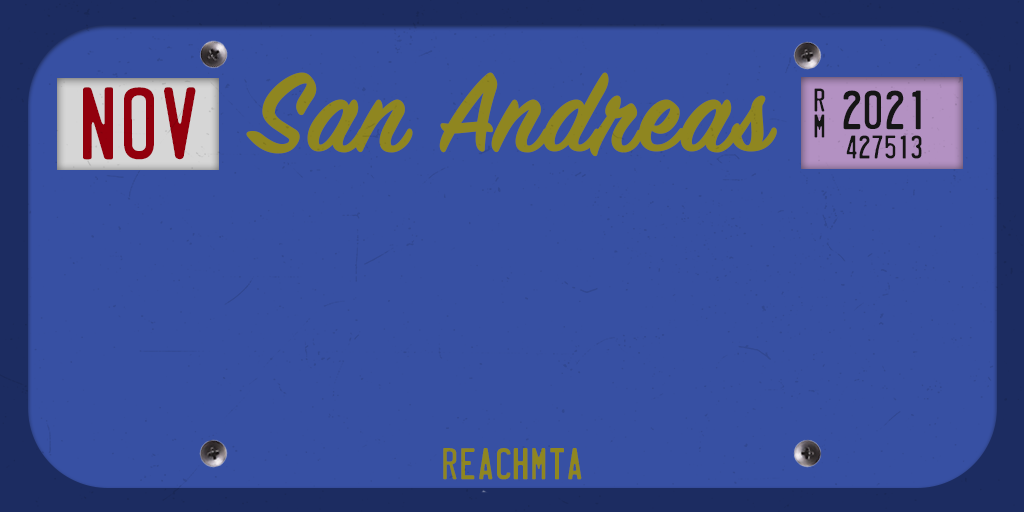
<style>
.page{position:relative;width:1024px;height:512px;background:#3750a3}
.page>*{position:absolute;margin:0}
.t1{font:120px "SignPainterHouseScript";color:#8f8620;font-weight:bold}
.t2{font:92.2px "LicensePlate";color:#92000d}
.t3{font:29.6px "LicensePlate";color:#151515}
.t4{font:49.4px "LicensePlate";color:#151515}
.t5{font:40px "LicensePlate";letter-spacing:0.005em;color:#8f8620}
</style>
<div class="page">
<p class="t1" style="left:246px;top:72px;width:531px;height:85px">San Andreas</p>
<p class="t2" style="left:83px;top:87px;width:113px;height:73px">NOV</p>
<p class="t3" style="left:814px;top:88px;width:11px;height:24px">R</p>
<p class="t4" style="left:843px;top:90px;width:78px;height:40px">2021</p>
<p class="t3" style="left:814px;top:114px;width:11px;height:24px">m</p>
<p class="t3" style="left:846px;top:135px;width:76px;height:24px">427513</p>
<p class="t5" style="left:443px;top:448px;width:139px;height:32px">REACHMTA</p>
</div>
